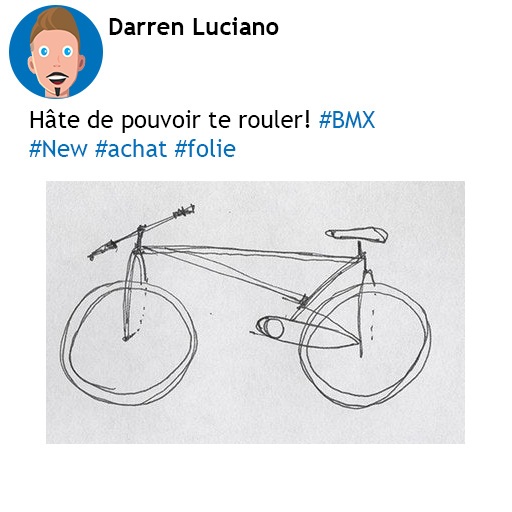
<style>
.page{position:relative;width:512px;height:512px;background:#ffffff}
.page>*{position:absolute;margin:0}
.t1{font:24px "TrebuchetMS-Bold";color:#000000}
.t2{font:24px "TrebuchetMS";color:#000000}
.t3{font:24px "TrebuchetMS";color:#0072bc}
</style>
<div class="page">
<p class="t1" style="left:109px;top:17px;width:170px;height:18px">Darren Luciano</p>
<p class="t2" style="left:29px;top:109px;width:346px;height:48px">Hâte de pouvoir te rouler! <span class="t3">#BMX <br>#New #achat #folie</span></p>
</div>
